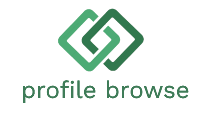
<style>
.page{position:relative;width:198px;height:114px;background:#ffffff}
.page>*{position:absolute;margin:0}
.t1{font:24px "WorkSans-Regular";color:#3f7c58}
</style>
<div class="page">
<p class="t1" style="left:23px;top:80px;width:166px;height:24px">profile browse</p>
</div>
